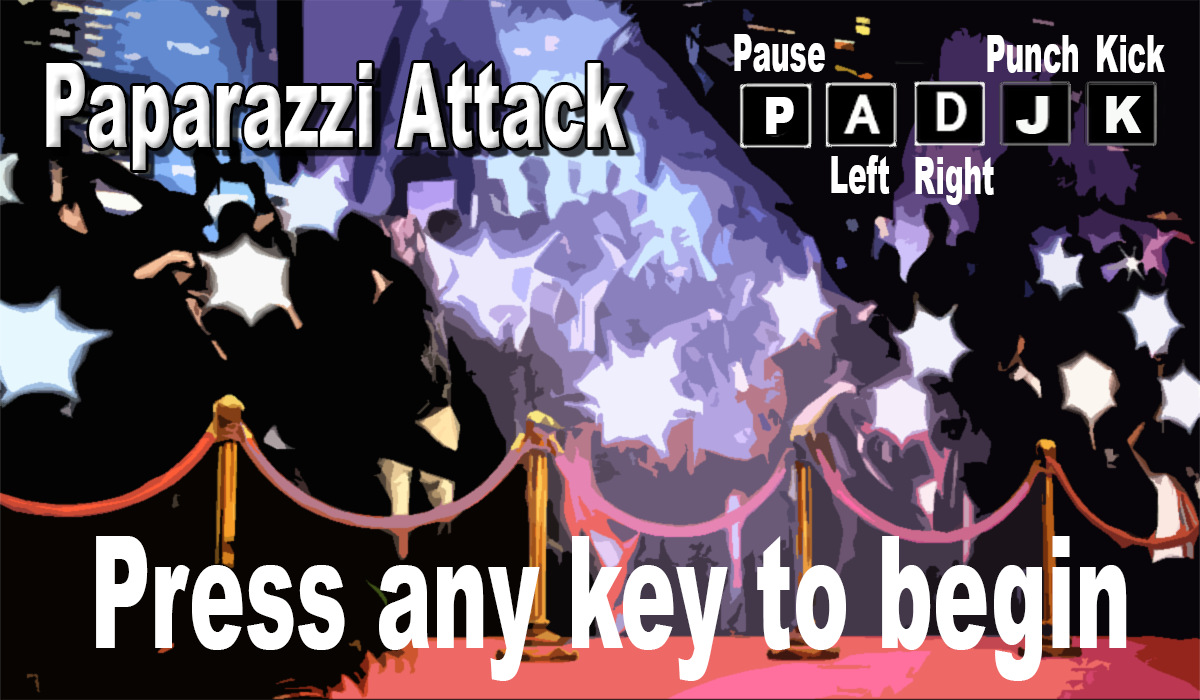
<style>
.page{position:relative;width:1200px;height:700px}
.page>*{position:absolute;margin:0}
.t1{font:52px "Arial-Black";color:#ffffff;scale:0.54 1}
.t2{font:117px "Arial-Black";color:#ffffff;scale:0.54 1}
.t3{font:52px "Arial-Black";color:#ffffff;scale:0.86 1}
.t4{font:52px "Arial-Black";color:#f8faf7;scale:0.88 1}
.t5{font:156px "Arial-Black";color:#ffffff;scale:0.54 1}
</style>
<div class="page">
<p class="t1" style="left:734px;top:34px;width:91px;height:38px">Pause</p>
<p class="t1" style="left:987px;top:35px;width:91px;height:38px">Punch</p>
<p class="t1" style="left:1097px;top:35px;width:68px;height:38px">Kick</p>
<p class="t2" style="left:46px;top:63px;width:580px;height:107px">Paparazzi Attack</p>
<p class="t3" style="left:766px;top:97px;width:28px;height:37px">P</p>
<p class="t4" style="left:1106px;top:96px;width:36px;height:37px">K</p>
<p class="t1" style="left:831px;top:155px;width:59px;height:39px">Left</p>
<p class="t1" style="left:915px;top:157px;width:79px;height:48px">Right</p>
<p class="t5" style="left:96px;top:536px;width:1031px;height:145px">Press any key to begin</p>
</div>
